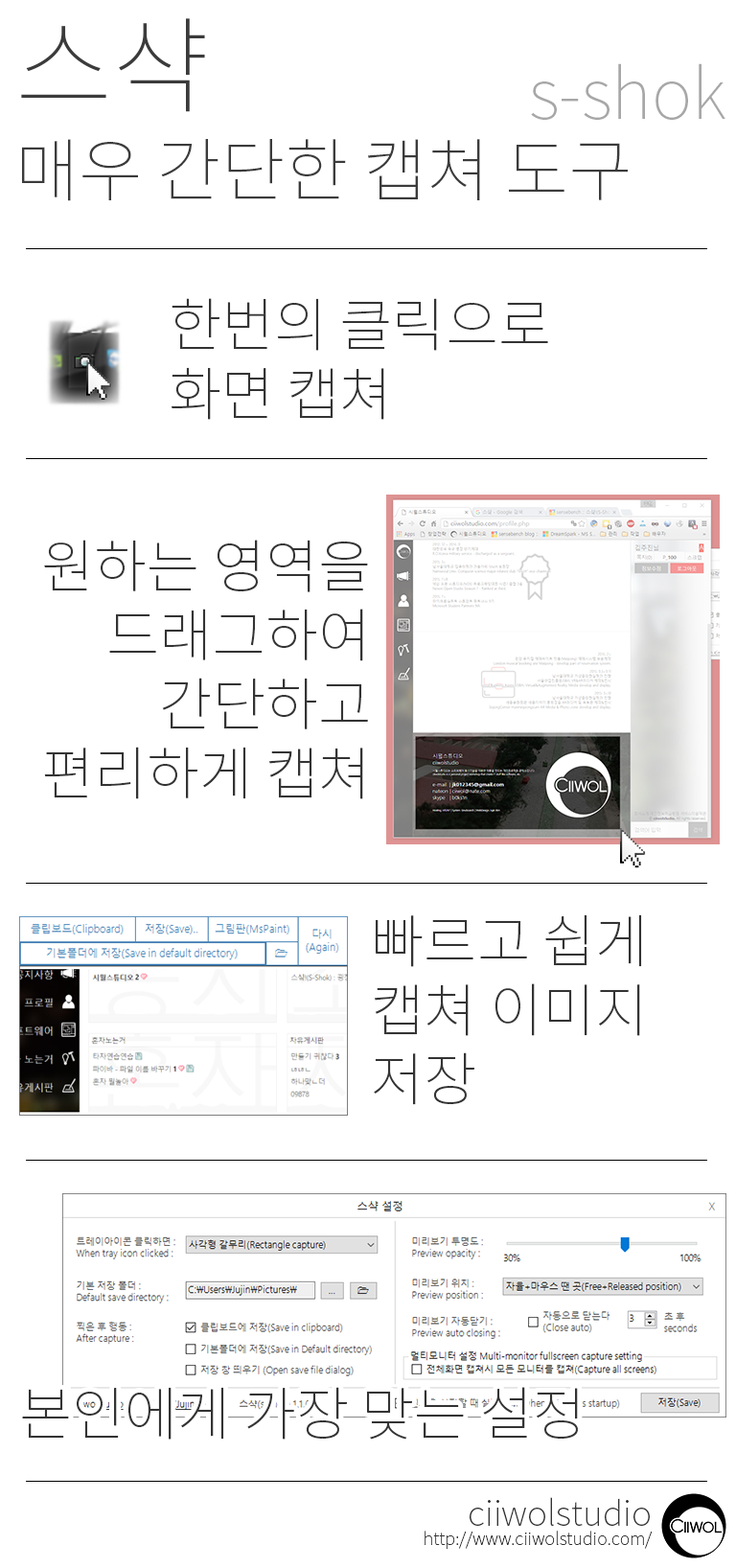
<style>
.page{position:relative;width:736px;height:1568px;background:#ffffff}
.page>*{position:absolute;margin:0}
.t1{font:69px/124.6px "NotoSansCJKkr-Thin";color:#3b3b3b}
.t2{font:105.4px/46px "NotoSansCJKkr-Thin";color:#3b3b3b}
.t3{font:69px/76.7px "NotoSansCJKkr-Thin";color:#a7a7a7}
.t4{font:57.5px/69px "NotoSansCJKkr-Thin";color:#333333}
.t5{font:57.5px "NotoSansCJKkr-Thin";color:#333333}
.t6{font:17.3px/28.8px "NotoSansCJKkr-Thin";color:#333333}
.t7{font:34.5px/34.5px "NotoSansCJKkr-Thin";color:#333333}
</style>
<div class="page">
<p class="t1" style="left:21px;top:18px;width:705px;height:183px"><span class="t2">스샥<br></span><span class="t3">s-shok<br></span>매우 간단한 캡쳐 도구</p>
<p class="t4" style="left:172px;top:298px;width:376px;height:122px">한번의 클릭으로 <br>화면 캡쳐</p>
<p class="t4" style="left:44px;top:540px;width:324px;height:259px;text-align:right">원하는 영역을 드래그하여 간단하고 편리하게 캡쳐</p>
<p class="t4" style="left:374px;top:914px;width:268px;height:191px">빠르고 쉽게 캡쳐 이미지 저장</p>
<p class="t5" style="left:22px;top:1387px;width:556px;height:53px">본인에게 가장 맞는 설정</p>
<p class="t6" style="left:425px;top:1497px;width:227px;height:52px;text-align:right"><span class="t7">ciiwolstudio<br></span>http://www.ciiwolstudio.com/</p>
</div>
